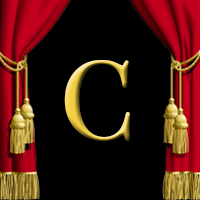
<style>
.page{position:relative;width:200px;height:200px;background:#000000}
.page>*{position:absolute;margin:0}
.t1{font:111.9px "BodoniSvtyTwoOSITCTT-Book";font-weight:bold}
</style>
<div class="page">
<p class="t1" style="left:64px;top:60px;width:66px;height:81px">C</p>
</div>
